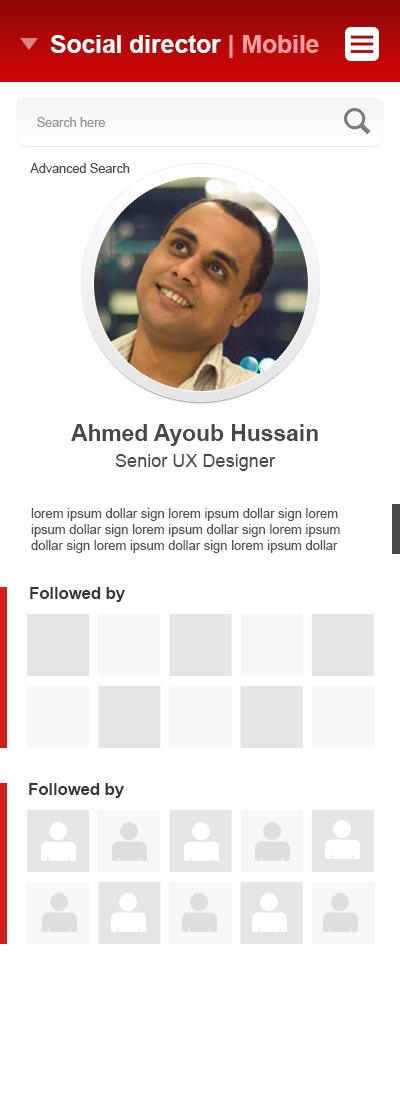
<style>
.page{position:relative;width:400px;height:1100px;background:#ffffff}
.page>*{position:absolute;margin:0}
.t1{font:24.6px "Arial-BoldMT";color:#ffffff}
.t2{font:24.6px "Arial-BoldMT";color:#ff9e9e}
.t3{font:12.6px "ArialMT";color:#959595}
.t4{font:12.6px "ArialMT";color:#484848}
.t5{font:22.8px "Arial-BoldMT";color:#484848}
.t6{font:18.1px/25.9px "ArialMT";color:#484848}
.t7{font:13px "ArialMT";color:#515151}
.t8{font:16.6px "Arial-BoldMT";color:#353535}
</style>
<div class="page">
<p class="t1" style="left:50px;top:35px;width:269px;height:23px">Social director <span class="t2">| Mobile</span></p>
<p class="t3" style="left:37px;top:117px;width:68px;height:10px">Search here</p>
<p class="t4" style="left:30px;top:163px;width:100px;height:10px">Advanced Search</p>
<p class="t5" style="left:71px;top:424px;width:247px;height:47px;text-align:center">Ahmed Ayoub Hussain<br><span class="t6">Senior UX Designer</span></p>
<p class="t7" style="left:31px;top:508px;width:309px;height:45px">lorem ipsum dollar sign lorem ipsum dollar sign lorem ipsum dollar sign lorem ipsum dollar sign lorem ipsum dollar sign lorem ipsum dollar sign lorem ipsum dollar sign lorem ipsum dollar sign</p>
<p class="t8" style="left:30px;top:587px;width:95px;height:15px">Followed by</p>
<p class="t8" style="left:29px;top:783px;width:95px;height:15px">Followed by</p>
</div>
